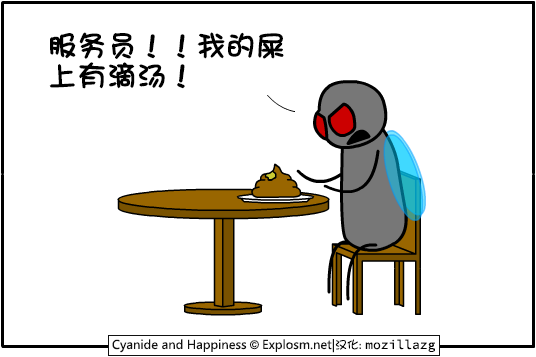
<style>
.page{position:relative;width:536px;height:357px;background:#ffffff}
.page>*{position:absolute;margin:0}
.t1{font:29px/30px "DFGirl";color:#000000;font-weight:bold}
</style>
<div class="page">
<p class="t1" style="left:49px;top:32px;width:235px;height:57px">服务员！！我的屎<br>上有滴汤！</p>
</div>
